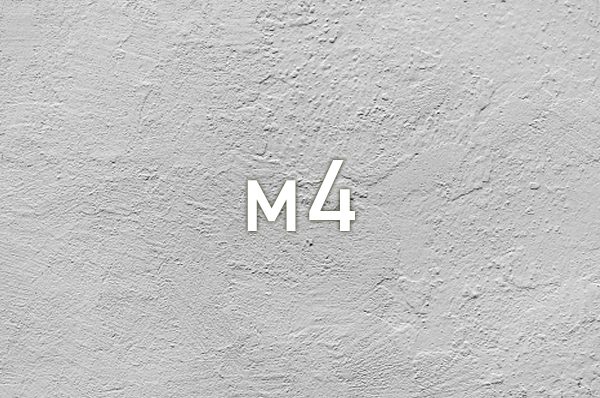
<style>
.page{position:relative;width:600px;height:398px}
.page>*{position:absolute;margin:0}
.t1{font:100px "Bahnschrift";color:#ffffff}
</style>
<div class="page">
<p class="t1" style="left:247px;top:160px;width:108px;height:71px">м4</p>
</div>
